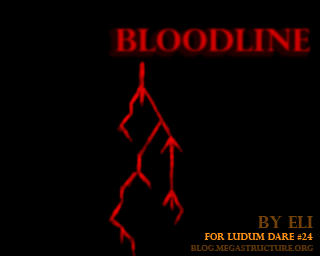
<style>
.page{position:relative;width:320px;height:256px;background:#000000}
.page>*{position:absolute;margin:0}
.t1{font:16px "PerpetuaTitlingMT-Bold";color:#724109}
.t2{font:9px "PerpetuaTitlingMT-Bold";color:#fc9114}
.t3{font:8px "PerpetuaTitlingMT-Bold";color:#5b3407}
</style>
<div class="page">
<p class="t1" style="left:258px;top:216px;width:55px;height:12px">by eli</p>
<p class="t2" style="left:204px;top:233px;width:109px;height:7px">for LUDUM DARE #24</p>
<p class="t3" style="left:190px;top:245px;width:124px;height:6px">blog.megastructure.org</p>
</div>
